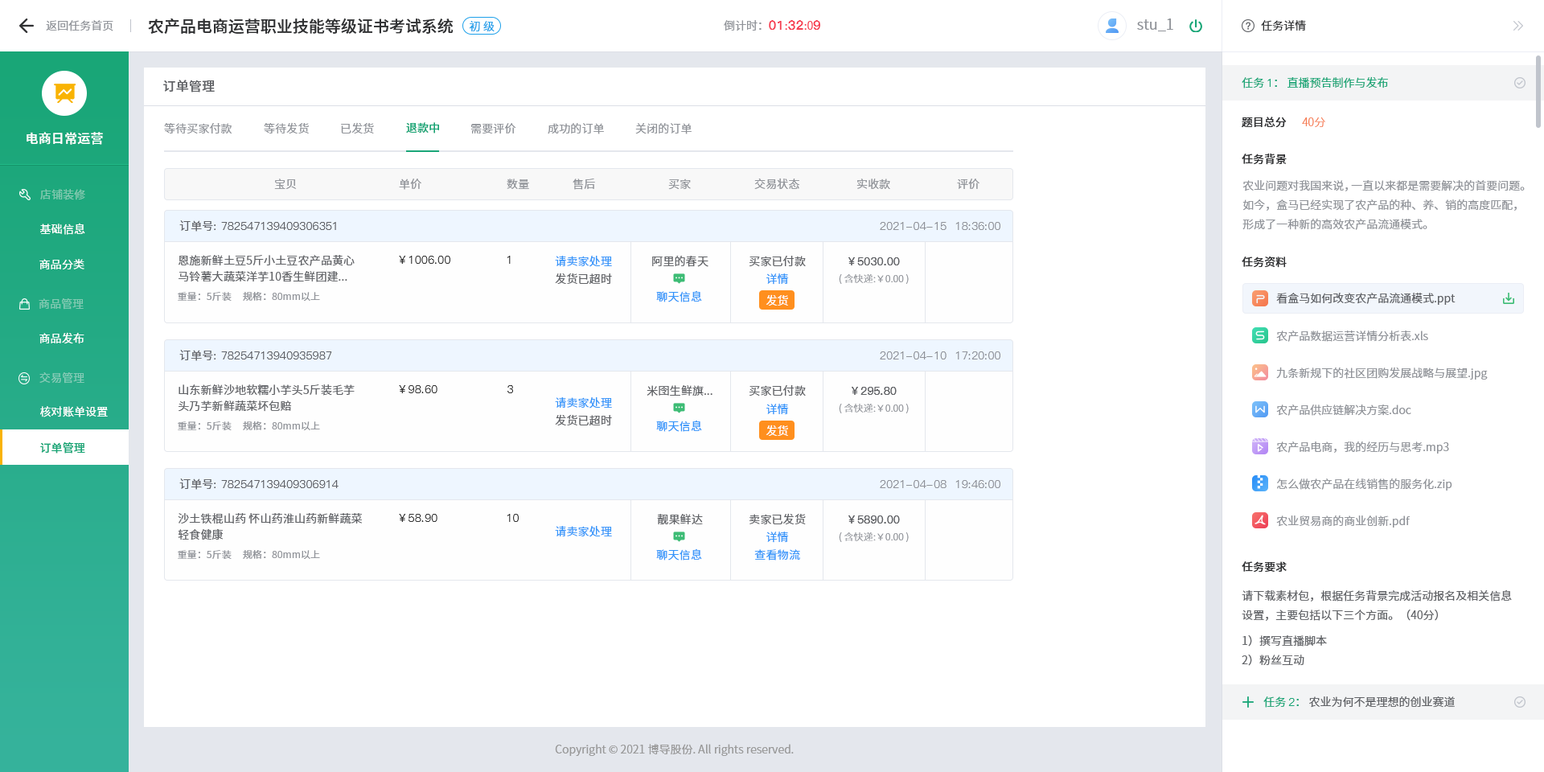
<style>
.page{position:relative;width:1544px;height:772px;background:#ffffff}
.page>*{position:absolute;margin:0}
.t1{font:16.1px "SourceHanSansCN-Medium";color:#303133}
.t2{font:11.3px "SourceHanSansCN-Normal";color:#909399}
.t3{font:11.3px "SourceHanSansCN-Normal";color:#1da0ea}
.t4{font:12.9px "PingFang-SC-Heavy";color:#f63f52}
.t5{font:11.3px "SourceHanSansCN-Normal";color:#f63f52}
.t6{font:14.5px "SourceHanSansCN-Normal";color:#909399}
.t7{font:11.3px "SourceHanSansCN-Normal";color:#303133}
.t8{font:11.3px "SourceHanSansCN-Normal";color:#19a677}
.t9{font:11.3px "PingFang-SC-Medium";color:#19a677}
.t10{font:12.9px "SourceHanSansCN-Medium";letter-spacing:0.01em;color:#606266}
.t11{font:11.3px "SourceHanSansCN-Normal";letter-spacing:0.01em;color:#909399}
.t12{font:11.3px "SourceHanSansCN-Medium";letter-spacing:0.01em;color:#19a677}
.t13{font:11.3px "SourceHanSansCN-Medium";color:#303133}
.t14{font:11.3px "SourceHanSansCN-Light";color:#f67d53}
.t15{font:12.9px "SourceHanSansCN-Medium";letter-spacing:0.01em;color:#ffffff}
.t16{font:11.3px/19.3px "SourceHanSansCN-Normal";color:#909399}
.t17{font:11.3px "SourceHanSansCN-Regular";letter-spacing:0.01em;color:#81c9b0}
.t18{font:11.3px "PingFang-SC-Medium";letter-spacing:0.01em;color:#606266}
.t19{font:11.3px "SourceHanSansCN-Normal";letter-spacing:0.01em;color:#606266}
.t20{font:11.3px "PingFang-SC-Medium";letter-spacing:0.01em;color:#909399}
.t21{font:11.3px "SourceHanSansCN-Normal";letter-spacing:0.01em;color:#ffffff}
.t22{font:11.3px/16.1px "SourceHanSansCN-Normal";letter-spacing:0.01em;color:#606266}
.t23{font:11.3px "PingFang-SC-Medium";letter-spacing:0.01em;color:#333333}
.t24{font:11.3px "SourceHanSansCN-Normal";letter-spacing:0.01em;color:#3395fa}
.t25{font:11.3px "PingFang-SC-Bold";letter-spacing:0.01em;color:#606266}
.t26{font:9.7px "SourceHanSansCN-Light";letter-spacing:0.01em;color:#909399}
.t27{font:9.7px "SourceHanSansCN-Normal";letter-spacing:0.01em;color:#909399}
.t28{font:11.3px "SourceHanSansCN-Normal";color:#606266}
.t29{font:11.3px "SourceHanSansCN-Regular";letter-spacing:0.01em;color:#82cab3}
.t30{font:11.3px "SourceHanSansCN-Normal";letter-spacing:0.01em;color:#fefefe}
.t31{font:11.3px "SourceHanSansCN-Regular";letter-spacing:0.01em;color:#ffffff}
.t32{font:11.3px "SourceHanSansCN-Regular";letter-spacing:0.01em;color:#83cbb6}
.t33{font:11.3px/19.3px "SourceHanSansCN-Normal";color:#606266}
.t34{font:11.3px "PingFang-SC-Medium";color:#1aa678}
.t35{font:11.3px "SourceHanSansCN-Normal";color:#1aa678}
.t36{font:11.3px "SourceHanSansCN-Normal";color:#999999}
</style>
<div class="page">
<p class="t1" style="left:148px;top:18px;width:306px;height:16px">农产品电商运营职业技能等级证书考试系统</p>
<p class="t2" style="left:46px;top:20px;width:67px;height:11px">返回任务首页</p>
<p class="t3" style="left:469px;top:21px;width:26px;height:11px">初 级</p>
<p class="t2" style="left:724px;top:20px;width:96px;height:11px">倒计时：<span class="t4">01</span><span class="t5">:</span><span class="t4">32</span><span class="t5">:0</span><span class="t4">9</span></p>
<p class="t6" style="left:1137px;top:18px;width:37px;height:13px">stu_1</p>
<p class="t7" style="left:1261px;top:20px;width:45px;height:11px">任务详情</p>
<p class="t8" style="left:1242px;top:76px;width:146px;height:12px">任务 <span class="t9">1</span>： 直播预告制作与发布</p>
<p class="t10" style="left:163px;top:80px;width:52px;height:12px">订单管理</p>
<p class="t11" style="left:164px;top:123px;width:68px;height:11px">等待买家付款</p>
<p class="t11" style="left:264px;top:122px;width:45px;height:12px">等待发货</p>
<p class="t11" style="left:341px;top:122px;width:33px;height:12px">已发货</p>
<p class="t12" style="left:406px;top:122px;width:33px;height:12px">退款中</p>
<p class="t11" style="left:471px;top:123px;width:45px;height:11px">需要评价</p>
<p class="t11" style="left:548px;top:123px;width:56px;height:11px">成功的订单</p>
<p class="t11" style="left:635px;top:123px;width:57px;height:11px">关闭的订单</p>
<p class="t13" style="left:1242px;top:117px;width:45px;height:11px">题目总分</p>
<p class="t14" style="left:1302px;top:117px;width:24px;height:10px">40分</p>
<p class="t15" style="left:27px;top:132px;width:76px;height:13px">电商日常运营</p>
<p class="t13" style="left:1242px;top:153px;width:45px;height:12px">任务背景</p>
<p class="t11" style="left:274px;top:179px;width:23px;height:10px">宝贝</p>
<p class="t11" style="left:399px;top:179px;width:22px;height:11px">单价</p>
<p class="t11" style="left:507px;top:179px;width:22px;height:10px">数量</p>
<p class="t11" style="left:573px;top:179px;width:22px;height:11px">售后</p>
<p class="t11" style="left:668px;top:179px;width:23px;height:11px">买家</p>
<p class="t11" style="left:754px;top:178px;width:46px;height:11px">交易状态</p>
<p class="t11" style="left:857px;top:179px;width:33px;height:10px">实收款</p>
<p class="t11" style="left:957px;top:179px;width:23px;height:10px">评价</p>
<p class="t16" style="left:1243px;top:180px;width:282px;height:50px">农业问题对我国来说，一直以来都是需要解决的首要问题。如今，盒马已经实现了农产品的种、养、销的高度匹配，形成了一种新的高效农产品流通模式。</p>
<p class="t17" style="left:40px;top:189px;width:45px;height:11px">店铺装修</p>
<p class="t18" style="left:179px;top:220px;width:157px;height:12px"><span class="t19">订单号</span>: 782547139409306351</p>
<p class="t20" style="left:880px;top:222px;width:121px;height:8px">2021-04-15  18:36:00</p>
<p class="t21" style="left:40px;top:223px;width:45px;height:12px">基础信息</p>
<p class="t22" style="left:179px;top:255px;width:176px;height:27px">恩施新鲜土豆5斤小土豆农产品黄心马铃薯大蔬菜洋芋10香生鲜团建...</p>
<p class="t23" style="left:399px;top:256px;width:51px;height:8px">￥1006.00</p>
<p class="t23" style="left:507px;top:256px;width:4px;height:8px">1</p>
<p class="t24" style="left:555px;top:256px;width:57px;height:11px">请卖家处理</p>
<p class="t19" style="left:652px;top:256px;width:57px;height:11px">阿里的春天</p>
<p class="t19" style="left:749px;top:256px;width:57px;height:11px">买家已付款</p>
<p class="t25" style="left:849px;top:257px;width:51px;height:8px">￥5030.00</p>
<p class="t13" style="left:1242px;top:256px;width:45px;height:12px">任务资料</p>
<p class="t21" style="left:39px;top:259px;width:45px;height:10px">商品分类</p>
<p class="t19" style="left:555px;top:273px;width:57px;height:12px">发货已超时</p>
<p class="t24" style="left:767px;top:273px;width:22px;height:12px">详情</p>
<p class="t26" style="left:839px;top:274px;width:70px;height:10px">( 含快递:￥0.00 )</p>
<p class="t27" style="left:178px;top:292px;width:142px;height:9px">重量：5斤装     规格：80mm以上</p>
<p class="t24" style="left:656px;top:290px;width:46px;height:12px">聊天信息</p>
<p class="t28" style="left:1276px;top:293px;width:180px;height:12px">看盒马如何改变农产品流通模式.ppt</p>
<p class="t29" style="left:39px;top:298px;width:45px;height:12px">商品管理</p>
<p class="t30" style="left:766px;top:294px;width:22px;height:12px">发货</p>
<p class="t31" style="left:39px;top:332px;width:45px;height:12px">商品发布</p>
<p class="t2" style="left:1276px;top:331px;width:152px;height:11px">农产品数据运营详情分析表.xls</p>
<p class="t18" style="left:179px;top:350px;width:153px;height:11px"><span class="t19">订单号</span>: 78254713940935987</p>
<p class="t20" style="left:880px;top:351px;width:121px;height:9px">2021-04-10  17:20:00</p>
<p class="t32" style="left:39px;top:372px;width:45px;height:12px">交易管理</p>
<p class="t2" style="left:1276px;top:367px;width:212px;height:13px">九条新规下的社区团购发展战略与展望.jpg</p>
<p class="t22" style="left:179px;top:384px;width:176px;height:28px">山东新鲜沙地软糯小芋头5斤装毛芋头乃芋新鲜蔬菜坏包赔</p>
<p class="t23" style="left:399px;top:385px;width:39px;height:8px">￥98.60</p>
<p class="t23" style="left:508px;top:385px;width:5px;height:8px">3</p>
<p class="t19" style="left:647px;top:385px;width:66px;height:12px">米囹生鲜旗...</p>
<p class="t19" style="left:749px;top:385px;width:57px;height:12px">买家已付款</p>
<p class="t25" style="left:852px;top:387px;width:45px;height:8px">￥295.80</p>
<p class="t24" style="left:555px;top:397px;width:57px;height:12px">请卖家处理</p>
<p class="t21" style="left:40px;top:406px;width:68px;height:11px">核对账单设置</p>
<p class="t24" style="left:767px;top:404px;width:22px;height:11px">详情</p>
<p class="t26" style="left:839px;top:404px;width:70px;height:9px">( 含快递:￥0.00 )</p>
<p class="t2" style="left:1276px;top:405px;width:136px;height:11px">农产品供应链解决方案.doc</p>
<p class="t27" style="left:178px;top:421px;width:142px;height:9px">重量：5斤装     规格：80mm以上</p>
<p class="t19" style="left:555px;top:414px;width:57px;height:12px">发货已超时</p>
<p class="t24" style="left:656px;top:420px;width:46px;height:12px">聊天信息</p>
<p class="t30" style="left:766px;top:425px;width:22px;height:11px">发货</p>
<p class="t12" style="left:40px;top:442px;width:45px;height:12px">订单管理</p>
<p class="t2" style="left:1276px;top:442px;width:173px;height:12px">农产品电商，我的经历与思考.mp3</p>
<p class="t18" style="left:179px;top:479px;width:160px;height:11px"><span class="t19">订单号</span>: 782547139409306914</p>
<p class="t20" style="left:880px;top:480px;width:121px;height:8px">2021-04-08  19:46:00</p>
<p class="t2" style="left:1277px;top:479px;width:176px;height:12px">怎么做农产品在线销售的服务化.zip</p>
<p class="t22" style="left:178px;top:513px;width:185px;height:28px">沙土铁棍山药 怀山药淮山药新鲜蔬菜轻食健康</p>
<p class="t23" style="left:399px;top:514px;width:39px;height:8px">￥58.90</p>
<p class="t23" style="left:507px;top:514px;width:12px;height:8px">10</p>
<p class="t19" style="left:657px;top:514px;width:46px;height:11px">靓果鲜达</p>
<p class="t19" style="left:750px;top:513px;width:56px;height:11px">卖家已发货</p>
<p class="t25" style="left:849px;top:516px;width:51px;height:8px">￥5890.00</p>
<p class="t2" style="left:1276px;top:516px;width:135px;height:12px">农业贸易商的商业创新.pdf</p>
<p class="t24" style="left:555px;top:526px;width:57px;height:11px">请卖家处理</p>
<p class="t24" style="left:767px;top:532px;width:22px;height:11px">详情</p>
<p class="t26" style="left:839px;top:532px;width:70px;height:10px">( 含快递:￥0.00 )</p>
<p class="t27" style="left:178px;top:550px;width:142px;height:9px">重量：5斤装     规格：80mm以上</p>
<p class="t24" style="left:656px;top:549px;width:46px;height:12px">聊天信息</p>
<p class="t24" style="left:754px;top:549px;width:46px;height:12px">查看物流</p>
<p class="t13" style="left:1242px;top:561px;width:45px;height:12px">任务要求</p>
<p class="t33" style="left:1242px;top:590px;width:270px;height:76px">请下载素材包，根据任务背景完成活动报名及相关信息设置，主要包括以下三个方面。（40分）<br>1）撰写直播脚本<br>2）粉丝互动</p>
<p class="t28" style="left:1264px;top:697px;width:191px;height:11px"><span class="t8">任务 </span><span class="t34">2</span><span class="t35">：</span> 农业为何不是理想的创业赛道</p>
<p class="t36" style="left:555px;top:744px;width:239px;height:12px">Copyright © 2021 博导股份. All rights reserved.</p>
</div>
